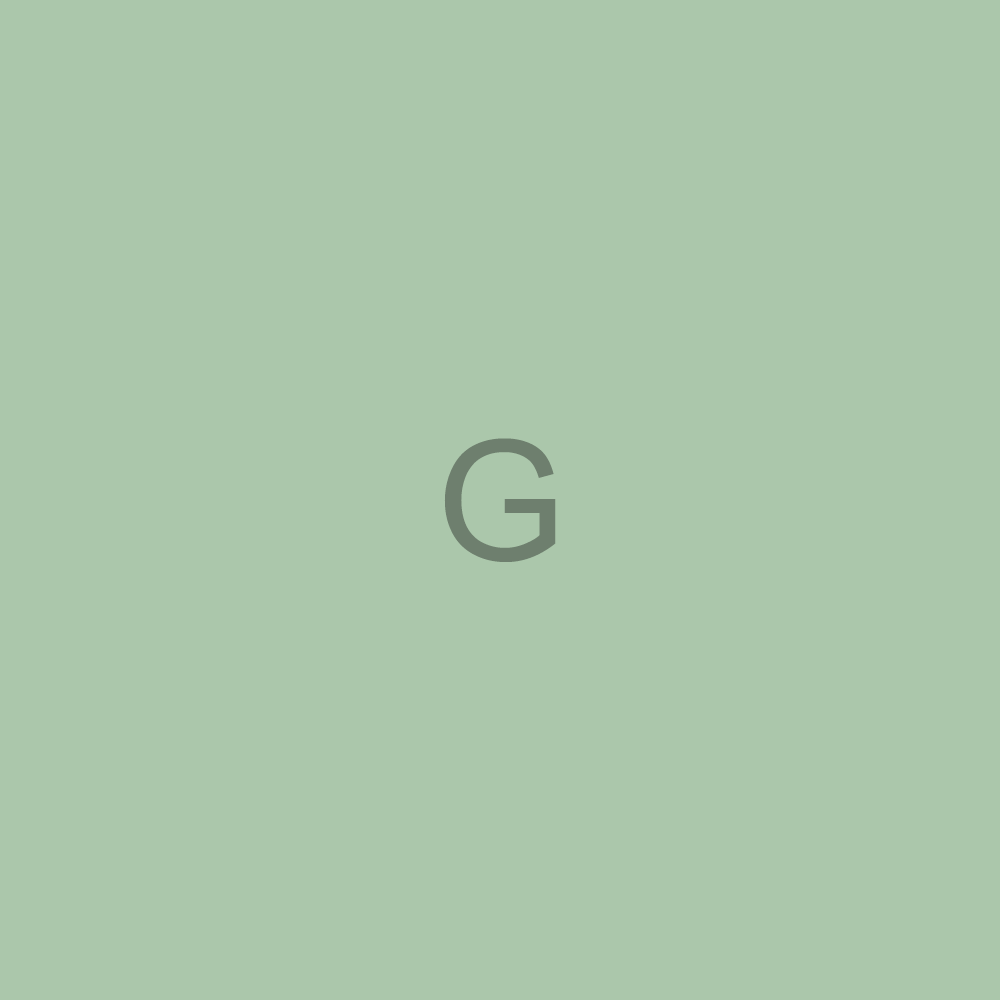
<style>
.page{position:relative;width:1000px;height:1000px;background:#abc7ab}
.page>*{position:absolute;margin:0}
.t1{font:166.7px "ArialMT";color:#6e7f6e}
</style>
<div class="page">
<p class="t1" style="left:444px;top:438px;width:112px;height:124px">G</p>
</div>
